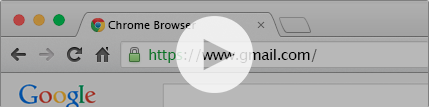
<style>
.page{position:relative;width:429px;height:107px;background:#b8b8b8}
.page>*{position:absolute;margin:0}
.t1{font:11px "LucidaGrande";color:#000000}
.t2{font:15px "LucidaGrande";letter-spacing:-0.036em}
</style>
<div class="page">
<p class="t1" style="left:108px;top:21px;width:88px;height:8px">Chrome Browser</p>
<p class="t2" style="left:149px;top:49px;width:168px;height:14px">https://www.gmail.com/</p>
</div>
